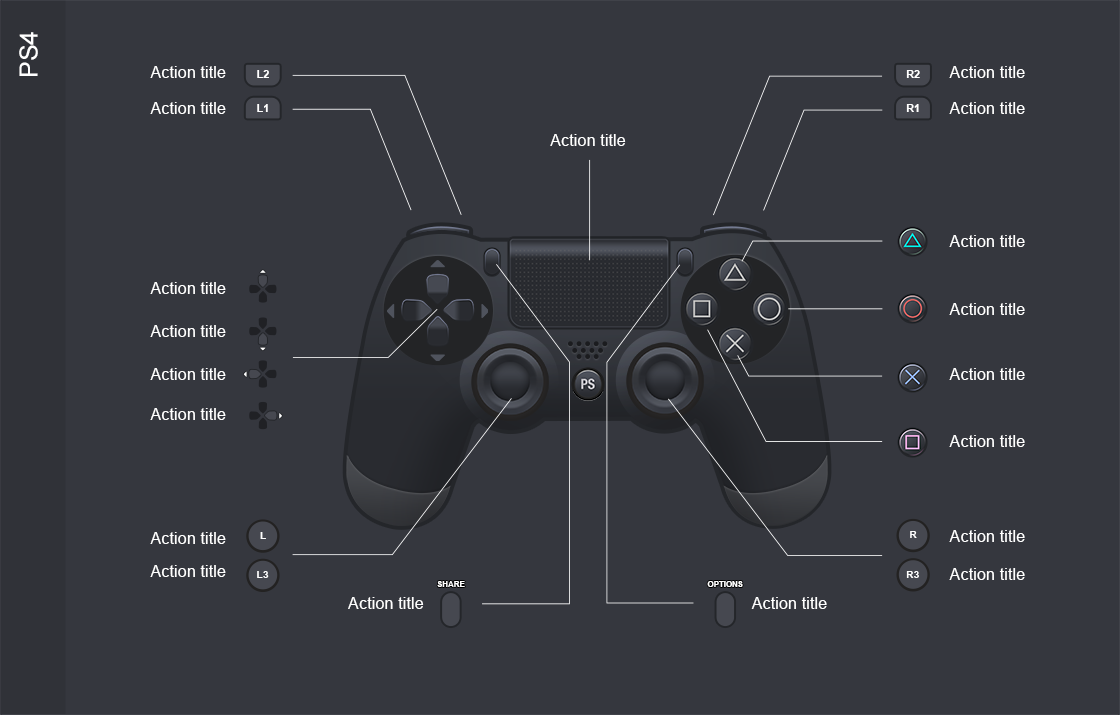
<style>
.page{position:relative;width:1120px;height:715px;background:#35373e}
.page>*{position:absolute;margin:0}
.t1{font:25px "ArialMT";color:#ffffff}
.t2{font:16.4px "ArialMT";color:#ffffff}
.t3{font:10.9px "Arial-BoldMT";color:#ffffff}
.t4{font:10.5px "Arial-BoldMT";color:#ffffff}
.t5{font:7.8px "Arial-BoldMT";color:#ffffff}
</style>
<div class="page">
<p class="t1" style="left:19px;top:32px;width:19px;height:44px;rotate:-90deg">PS4</p>
<p class="t2" style="left:150px;top:66px;width:76px;height:12px">Action title</p>
<p class="t3" style="left:257px;top:70px;width:12px;height:8px">L2</p>
<p class="t3" style="left:906px;top:70px;width:14px;height:8px">R2</p>
<p class="t2" style="left:949px;top:66px;width:76px;height:12px">Action title</p>
<p class="t2" style="left:150px;top:102px;width:76px;height:12px">Action title</p>
<p class="t2" style="left:949px;top:102px;width:76px;height:12px">Action title</p>
<p class="t3" style="left:257px;top:104px;width:11px;height:8px">L1</p>
<p class="t3" style="left:906px;top:104px;width:13px;height:8px">R1</p>
<p class="t2" style="left:550px;top:134px;width:76px;height:12px">Action title</p>
<p class="t2" style="left:949px;top:235px;width:76px;height:12px">Action title</p>
<p class="t2" style="left:150px;top:282px;width:76px;height:12px">Action title</p>
<p class="t2" style="left:949px;top:303px;width:76px;height:12px">Action title</p>
<p class="t2" style="left:150px;top:325px;width:76px;height:12px">Action title</p>
<p class="t2" style="left:150px;top:368px;width:76px;height:12px">Action title</p>
<p class="t2" style="left:949px;top:368px;width:76px;height:12px">Action title</p>
<p class="t2" style="left:150px;top:408px;width:76px;height:12px">Action title</p>
<p class="t2" style="left:949px;top:435px;width:76px;height:12px">Action title</p>
<p class="t2" style="left:150px;top:532px;width:76px;height:12px">Action title</p>
<p class="t4" style="left:260px;top:532px;width:6px;height:7px">L</p>
<p class="t4" style="left:910px;top:531px;width:7px;height:7px">R</p>
<p class="t2" style="left:949px;top:530px;width:76px;height:12px">Action title</p>
<p class="t2" style="left:150px;top:565px;width:76px;height:12px">Action title</p>
<p class="t2" style="left:949px;top:568px;width:76px;height:12px">Action title</p>
<p class="t4" style="left:257px;top:571px;width:12px;height:7px">L3</p>
<p class="t5" style="left:437px;top:581px;width:28px;height:6px">SHARE</p>
<p class="t5" style="left:707px;top:581px;width:36px;height:6px">OPTIONS</p>
<p class="t4" style="left:906px;top:571px;width:13px;height:7px">R3</p>
<p class="t2" style="left:348px;top:597px;width:76px;height:12px">Action title</p>
<p class="t2" style="left:751px;top:597px;width:76px;height:12px">Action title</p>
</div>
